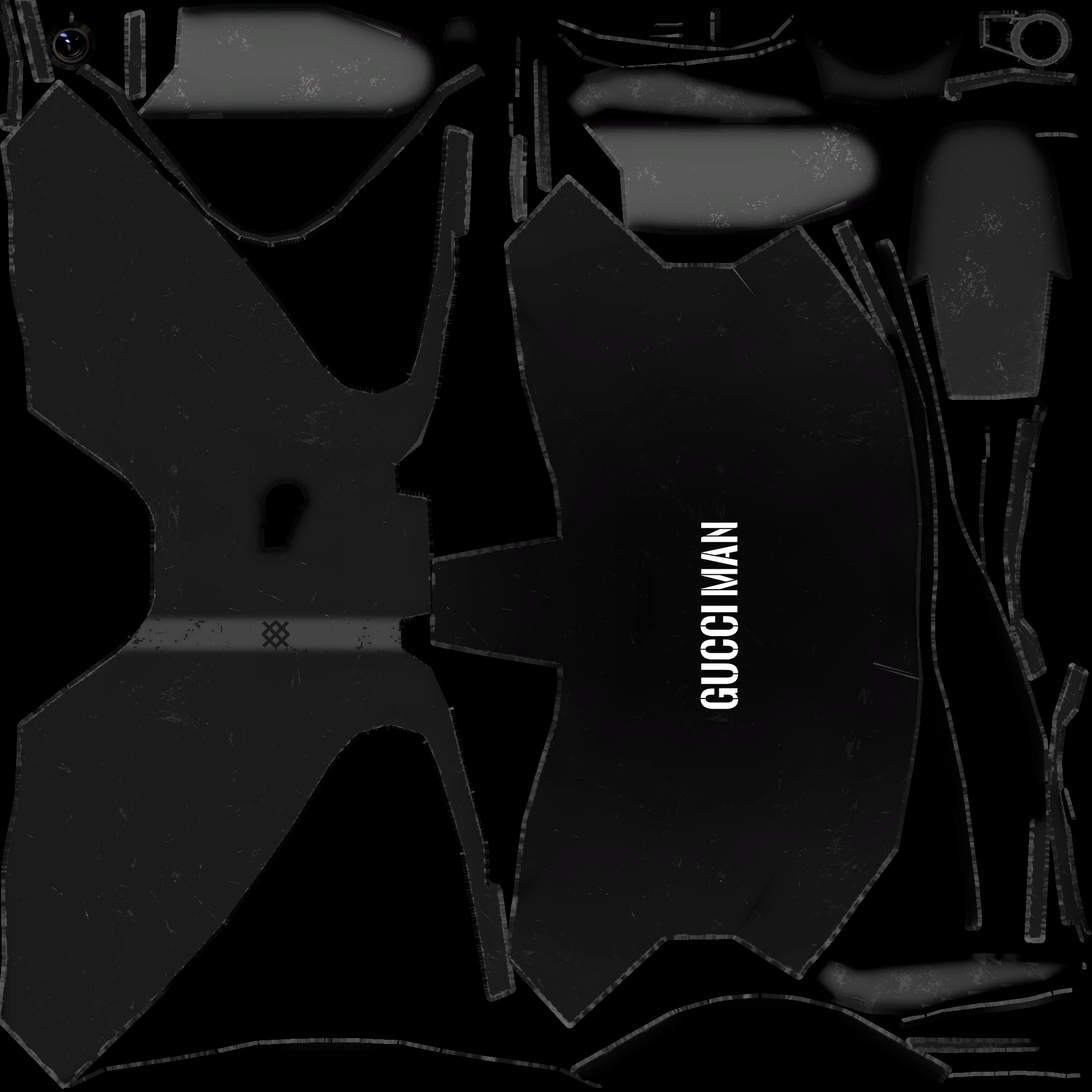
<style>
.page{position:relative;width:1092px;height:1092px;background:#000000}
.page>*{position:absolute;margin:0}
.t1{font:41.6px "OswaldStencil-Bold";color:#ffffff}
</style>
<div class="page">
<p class="t1" style="left:700px;top:523px;width:38px;height:186px;rotate:-90deg">Gucci Man</p>
</div>
